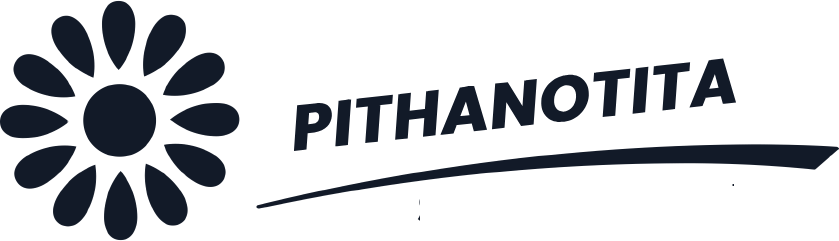
<style>
.page{position:relative;width:839px;height:241px;background:#ffffff}
.page>*{position:absolute;margin:0}
.t1{font:64px "Poppins-Bold";color:#121a28;text-transform:uppercase;font-weight:bold;font-style:italic}
</style>
<div class="page">
<p class="t1" style="left:294px;top:58px;width:442px;height:93px;rotate:-6deg">Pithanotita</p>
</div>
